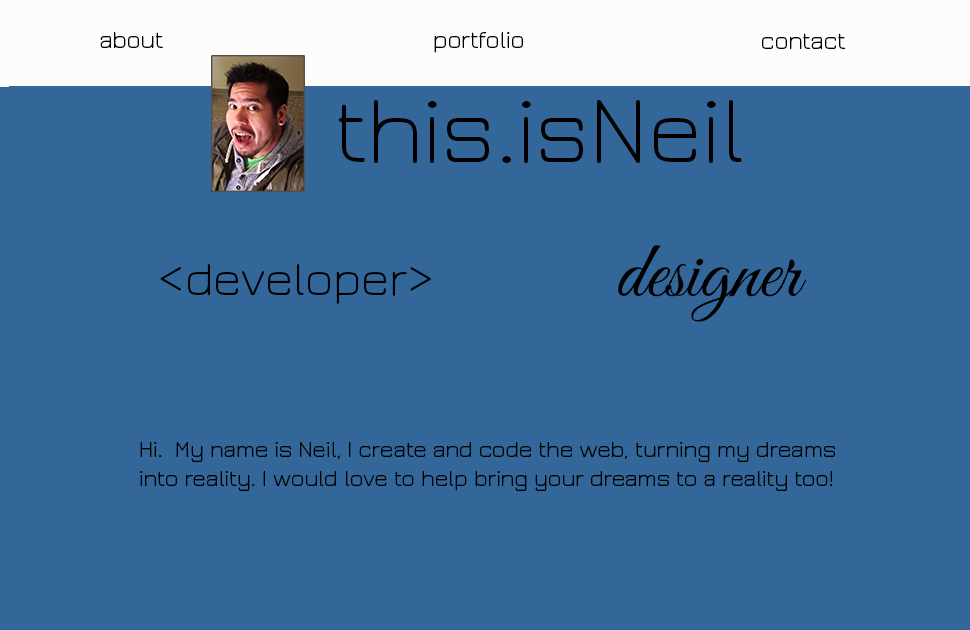
<style>
.page{position:relative;width:970px;height:630px;background:#336699}
.page>*{position:absolute;margin:0}
.t1{font:25px "JuraLight";color:#000000}
.t2{font:98px "JuraLight";color:#000000}
.t3{font:81px "GreatVibes-Regular";color:#000000}
.t4{font:50px "JuraLight";color:#000000}
.t5{font:24px "JuraLight";color:#000000}
</style>
<div class="page">
<p class="t1" style="left:100px;top:32px;width:63px;height:17px">about</p>
<p class="t1" style="left:434px;top:32px;width:89px;height:21px">portfolio</p>
<p class="t1" style="left:762px;top:33px;width:83px;height:17px">contact</p>
<p class="t2" style="left:339px;top:100px;width:403px;height:63px">this.isNeil</p>
<p class="t3" style="left:618px;top:245px;width:189px;height:77px">designer</p>
<p class="t4" style="left:160px;top:264px;width:271px;height:40px">&lt;developer&gt;</p>
<p class="t5" style="left:140px;top:442px;width:695px;height:49px">Hi.  My name is Neil, I create and code the web, turning my dreams<br>into reality. I would love to help bring your dreams to a reality too!</p>
</div>
